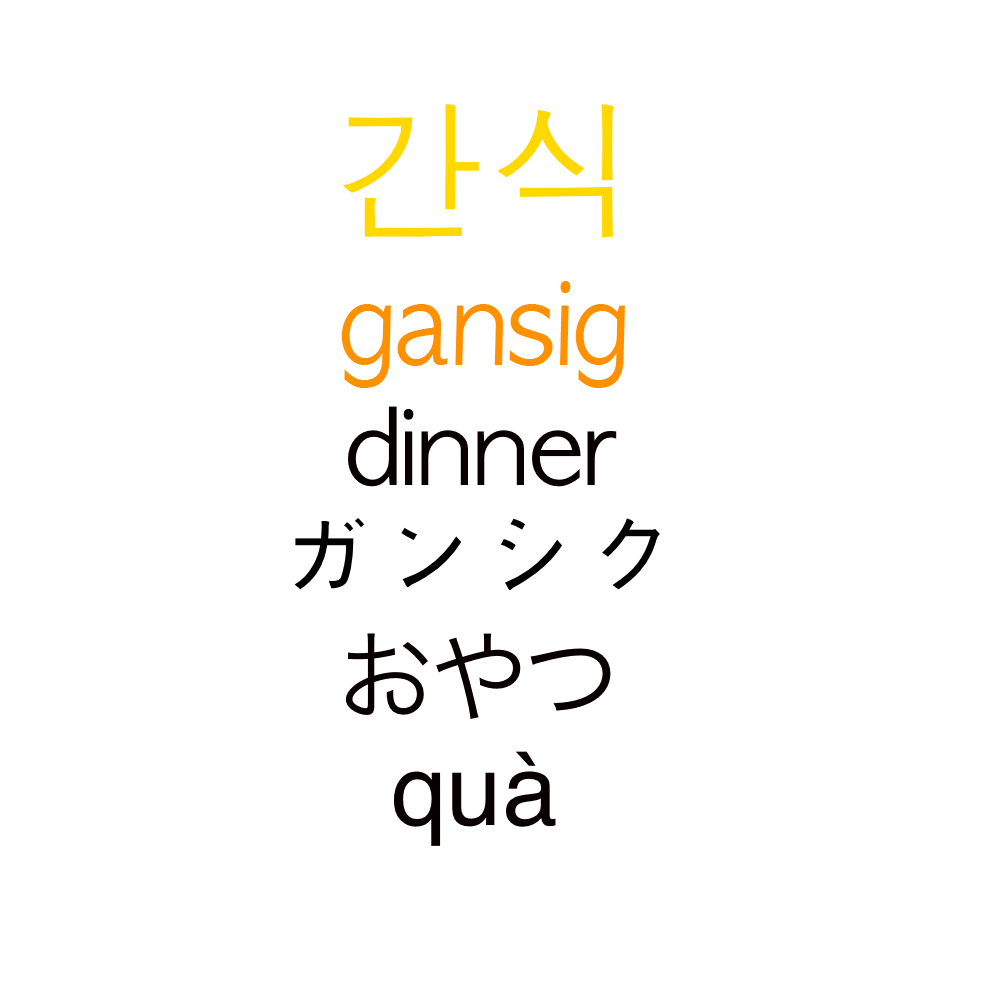
<style>
.page{position:relative;width:1000px;height:1000px;background:#ffffff}
.page>*{position:absolute;margin:0}
.t1{font:150px "AppleGothic";color:#ffd800}
.t2{font:111.2px "AppleGothic";color:#ff9000;scale:0.9 1}
.t3{font:100px "AppleGothic";color:#080000}
.t4{font:100px "AppleGothic";color:#000000}
.t5{font:100px "HiraKakuProN-W3";color:#080000}
.t6{font:100px "Helvetica";color:#080000}
</style>
<div class="page">
<p class="t1" style="left:343px;top:104px;width:271px;height:134px">간식</p>
<p class="t2" style="left:341px;top:281px;width:284px;height:107px">gansig</p>
<p class="t3" style="left:348px;top:406px;width:269px;height:81px">dinner</p>
<p class="t4" style="left:294px;top:518px;width:366px;height:72px">ガンシク</p>
<p class="t5" style="left:345px;top:633px;width:266px;height:86px">おやつ</p>
<p class="t6" style="left:393px;top:751px;width:163px;height:95px">quà</p>
</div>
